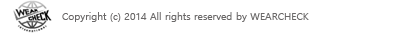
<style>
.page{position:relative;width:399px;height:33px;background:#ffffff}
.page>*{position:absolute;margin:0}
.t1{font:10px "MalgunGothicRegular";color:#6a6868}
</style>
<div class="page">
<p class="t1" style="left:62px;top:12px;width:247px;height:10px">Copyright (c) 2014 All rights reserved by WEARCHECK</p>
</div>
